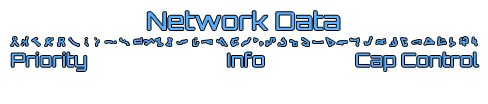
<style>
.page{position:relative;width:488px;height:104px;background:#ffffff}
.page>*{position:absolute;margin:0}
.t1{font:24px "Orbitron-Regular";color:#5aafff;font-weight:bold}
.t2{font:18px "Orbitron-Regular";color:#5aafff;font-weight:bold}
</style>
<div class="page">
<p class="t1" style="left:147px;top:11px;width:193px;height:19px">Network Data</p>
<p class="t2" style="left:11px;top:52px;width:468px;height:19px">Priority       Info        Cap Control</p>
</div>
